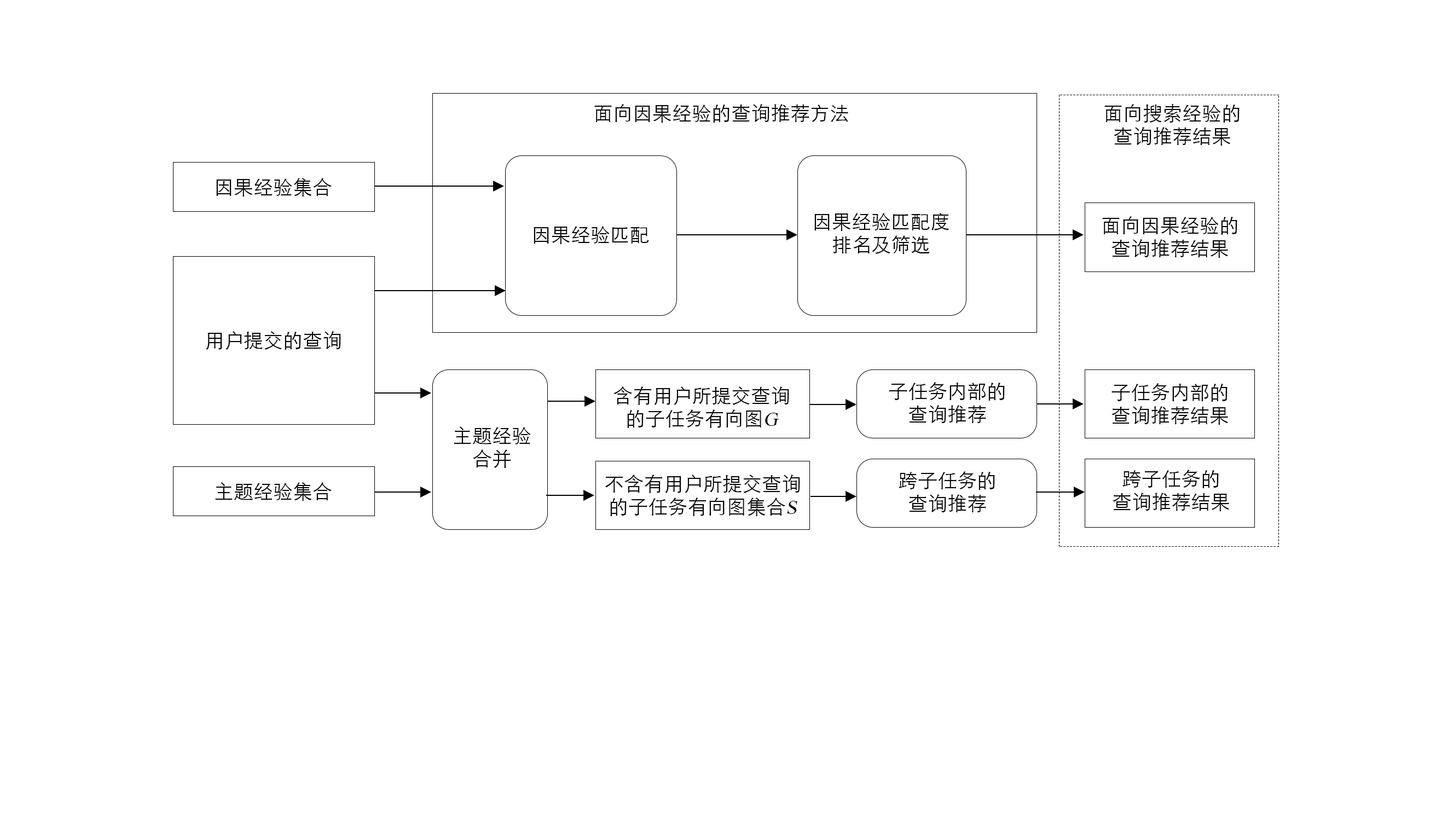
<style>
.page{position:relative;width:1453px;height:821px;background:#ffffff}
.page>*{position:absolute;margin:0}
.t1{font:19.7px "STHeitiSC-Light";color:#030303}
.t2{font:19.7px "TimesNewRomanPSMT";color:#030303;font-style:italic}
</style>
<div class="page">
<p class="t1" style="left:594px;top:104px;width:254px;height:19px">面向因果经验的查询推荐方法</p>
<p class="t1" style="left:1104px;top:104px;width:135px;height:42px;text-align:center">面向搜索经验的<br>查询推荐结果</p>
<p class="t1" style="left:216px;top:178px;width:116px;height:18px">因果经验集合</p>
<p class="t1" style="left:814px;top:213px;width:135px;height:41px;text-align:center">因果经验匹配度<br>排名及筛选</p>
<p class="t1" style="left:1102px;top:216px;width:135px;height:42px;text-align:center">面向因果经验的<br>查询推荐结果</p>
<p class="t1" style="left:534px;top:226px;width:115px;height:18px">因果经验匹配</p>
<p class="t1" style="left:206px;top:331px;width:135px;height:19px">用户提交的查询</p>
<p class="t1" style="left:613px;top:386px;width:176px;height:42px;text-align:center">含有用户所提交查询<br>的子任务有向图<span class="t2">G</span></p>
<p class="t1" style="left:889px;top:382px;width:116px;height:41px;text-align:center">子任务内部的<br>查询推荐</p>
<p class="t1" style="left:1111px;top:383px;width:117px;height:42px;text-align:center">子任务内部的<br>查询推荐结果</p>
<p class="t1" style="left:454px;top:426px;width:77px;height:42px;text-align:center">主题经验<br>合并</p>
<p class="t1" style="left:898px;top:471px;width:97px;height:41px;text-align:center">跨子任务的<br>查询推荐</p>
<p class="t1" style="left:1112px;top:469px;width:118px;height:42px;text-align:center">跨子任务的<br>查询推荐结果</p>
<p class="t1" style="left:215px;top:482px;width:117px;height:19px">主题经验集合</p>
<p class="t1" style="left:605px;top:474px;width:195px;height:42px;text-align:center">不含有用户所提交查询<br>的子任务有向图集合<span class="t2">S</span></p>
</div>
